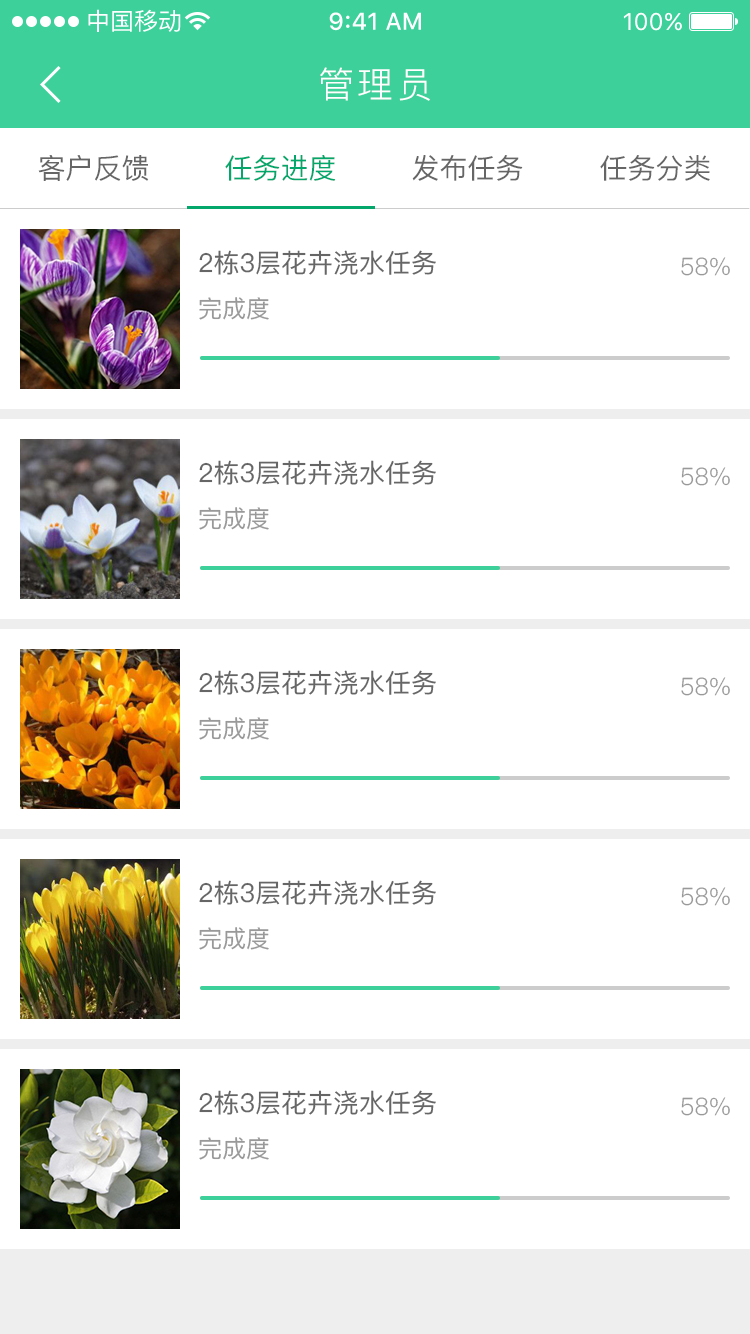
<style>
.page{position:relative;width:750px;height:1334px;background:#ffffff}
.page>*{position:absolute;margin:0}
.t1{font:36px "PingFang-SC-Regular";letter-spacing:0.1em;color:#ffffff}
.t2{font:28px "PingFang-SC-Medium";color:#666666}
.t3{font:28px "PingFang-SC-Medium";color:#04a76b}
.t4{font:26px "PingFang-SC-Medium";color:#666666}
.t5{font:24px "PingFang-SC-Regular";color:#999999}
.t6{font:24px "PingFang-SC-Medium";color:#999999}
</style>
<div class="page">
<p class="t1" style="left:320px;top:67px;width:110px;height:34px">管理员</p>
<p class="t2" style="left:38px;top:155px;width:111px;height:26px">客户反馈</p>
<p class="t3" style="left:225px;top:155px;width:111px;height:26px">任务进度</p>
<p class="t2" style="left:412px;top:155px;width:111px;height:26px">发布任务</p>
<p class="t2" style="left:600px;top:155px;width:110px;height:26px">任务分类</p>
<p class="t4" style="left:199px;top:250px;width:237px;height:25px">2栋3层花卉浇水任务</p>
<p class="t5" style="left:681px;top:257px;width:49px;height:19px">58%</p>
<p class="t6" style="left:199px;top:297px;width:70px;height:23px">完成度</p>
<p class="t4" style="left:199px;top:460px;width:237px;height:25px">2栋3层花卉浇水任务</p>
<p class="t5" style="left:681px;top:467px;width:49px;height:19px">58%</p>
<p class="t6" style="left:199px;top:507px;width:70px;height:23px">完成度</p>
<p class="t4" style="left:199px;top:670px;width:237px;height:25px">2栋3层花卉浇水任务</p>
<p class="t5" style="left:681px;top:677px;width:49px;height:19px">58%</p>
<p class="t6" style="left:199px;top:717px;width:70px;height:23px">完成度</p>
<p class="t4" style="left:199px;top:880px;width:237px;height:25px">2栋3层花卉浇水任务</p>
<p class="t5" style="left:681px;top:887px;width:49px;height:19px">58%</p>
<p class="t6" style="left:199px;top:927px;width:70px;height:23px">完成度</p>
<p class="t4" style="left:199px;top:1090px;width:237px;height:25px">2栋3层花卉浇水任务</p>
<p class="t5" style="left:681px;top:1097px;width:49px;height:19px">58%</p>
<p class="t6" style="left:199px;top:1137px;width:70px;height:23px">完成度</p>
</div>
